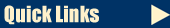
<style>
.page{position:relative;width:170px;height:28px;background:#003366}
.page>*{position:absolute;margin:0}
.t1{font:36px "Impact";color:#fff1cb}
</style>
<div class="page">
<p class="t1" style="left:4px;top:5px;width:95px;height:20px">Quick Links</p>
</div>
